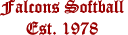
<style>
.page{position:relative;width:128px;height:35px;background:#ffffff}
.page>*{position:absolute;margin:0}
.t1{font:18px "OldEnglishTextMT";color:#990000}
</style>
<div class="page">
<p class="t1" style="left:0px;top:0px;width:124px;height:35px;text-align:center">Falcons Softball<br>Est. 1978</p>
</div>
